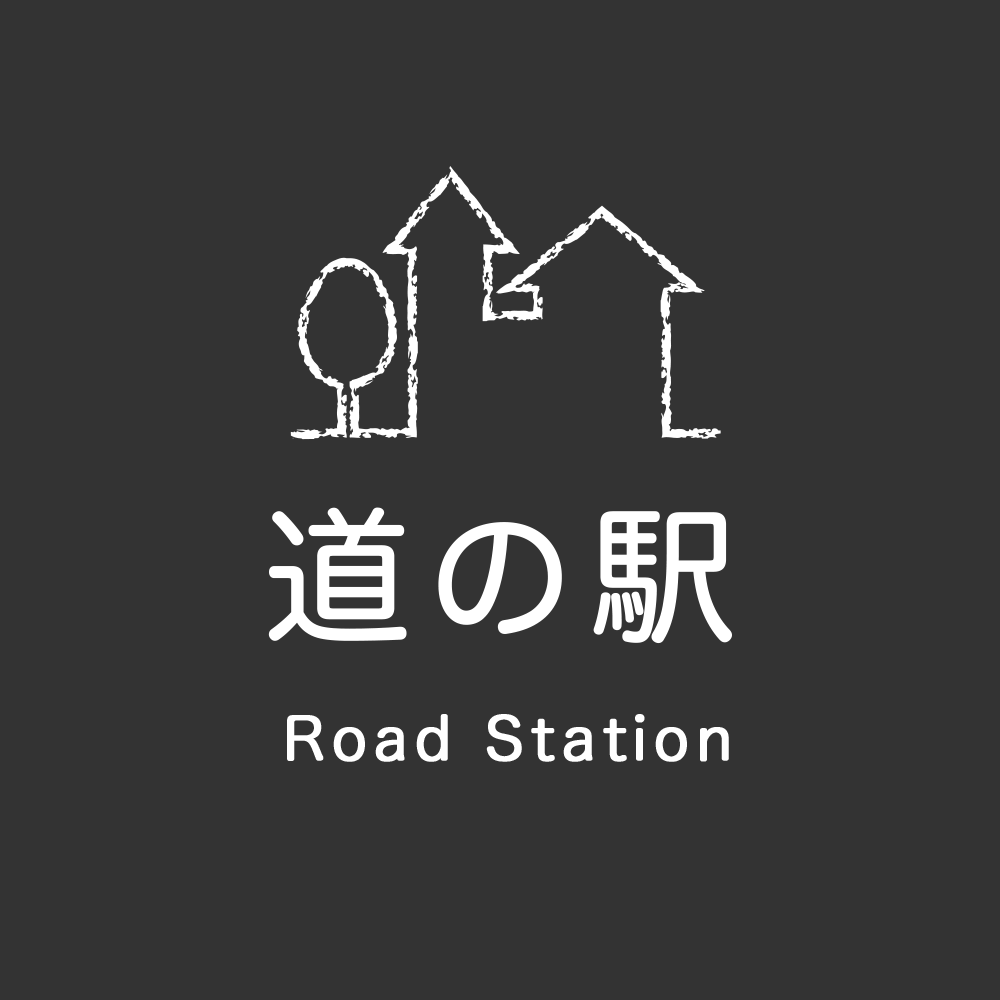
<style>
.page{position:relative;width:1000px;height:1000px;background:#333333}
.page>*{position:absolute;margin:0}
.t1{font:145px "HiraMaruProN-W4";letter-spacing:0.1em;color:#ffffff;font-weight:bold}
.t2{font:58px "HiraMaruProN-W4";letter-spacing:0.1em;color:#ffffff;font-weight:bold}
</style>
<div class="page">
<p class="t1" style="left:268px;top:507px;width:464px;height:137px">道の駅</p>
<p class="t2" style="left:287px;top:714px;width:442px;height:48px">Road Station</p>
</div>
